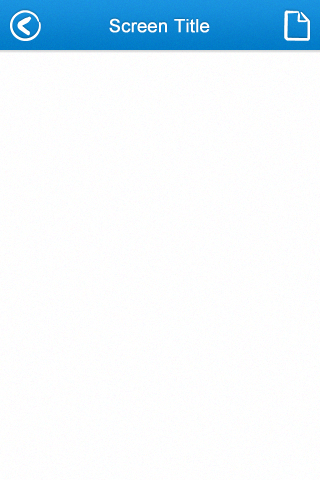
<style>
.page{position:relative;width:320px;height:480px}
.page>*{position:absolute;margin:0}
.t1{font:18px "ArialMT";letter-spacing:0.025em;color:#ffffff;font-weight:bold}
</style>
<div class="page">
<p class="t1" style="left:109px;top:18px;width:101px;height:15px">Screen Title</p>
</div>
